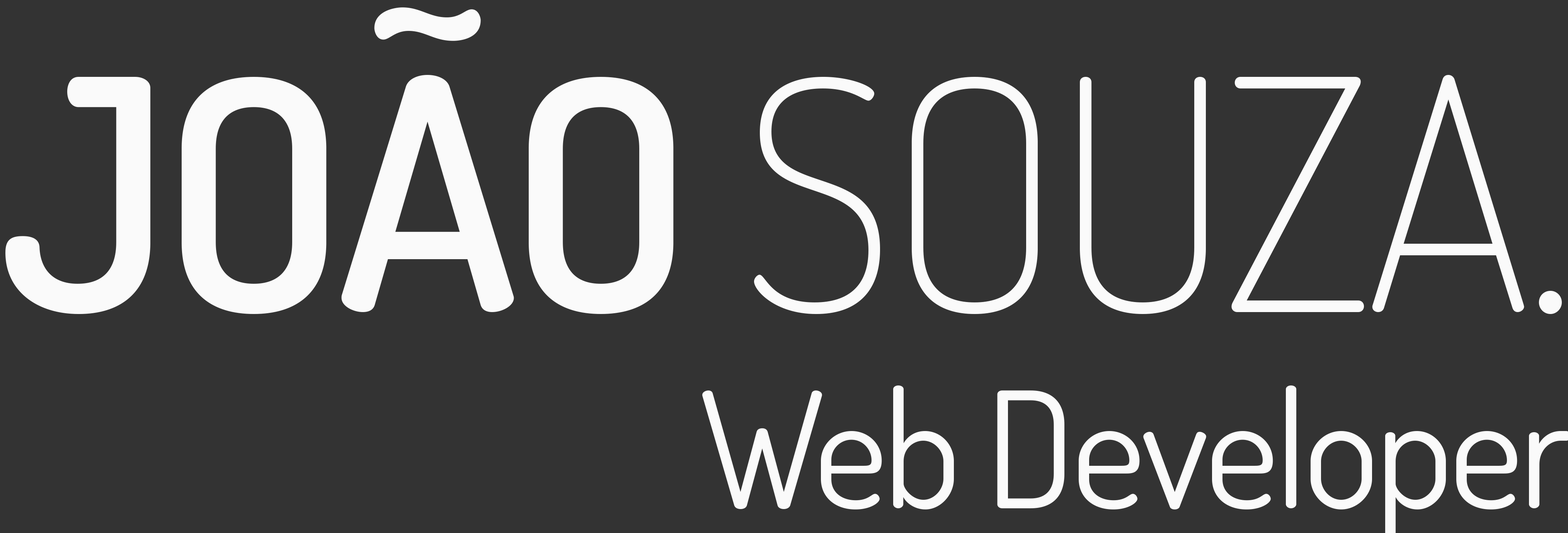
<style>
.page{position:relative;width:1568px;height:533px;background:#333333}
.page>*{position:absolute;margin:0}
.t1{font:322.1px "Dosis-ExtraLight";letter-spacing:-0.025em;color:#fafafa}
.t2{font:322.1px "Dosis-SemiBold";letter-spacing:-0.025em;color:#fafafa}
</style>
<div class="page">
<p class="t1" style="left:5px;top:7px;width:1557px;height:308px"><span class="t2">JOÃO </span>SOUZA.</p>
</div>
